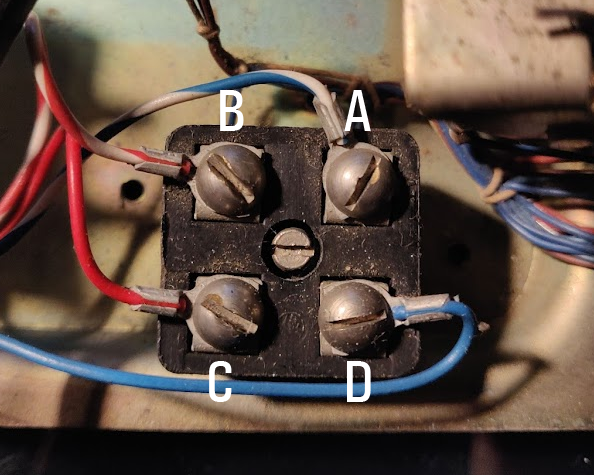
<style>
.page{position:relative;width:594px;height:475px}
.page>*{position:absolute;margin:0}
.t1{font:60px "UniversCondensed-Medium";color:#ffffff}
</style>
<div class="page">
<p class="t1" style="left:220px;top:90px;width:24px;height:41px">B</p>
<p class="t1" style="left:344px;top:90px;width:27px;height:41px">A</p>
<p class="t1" style="left:209px;top:361px;width:23px;height:41px">C</p>
<p class="t1" style="left:347px;top:361px;width:24px;height:41px">D</p>
</div>
